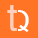
<style>
.page{position:relative;width:38px;height:38px;background:#ff7425}
.page>*{position:absolute;margin:0}
.t1{font:38px "Helvetica";color:#ffcfbd}
.t2{font:28.9px "Helvetica"}
</style>
<div class="page">
<p class="t1" style="left:7px;top:5px;width:10px;height:26px">t</p>
<p class="t2" style="left:8px;top:10px;width:21px;height:22px">Q</p>
</div>
